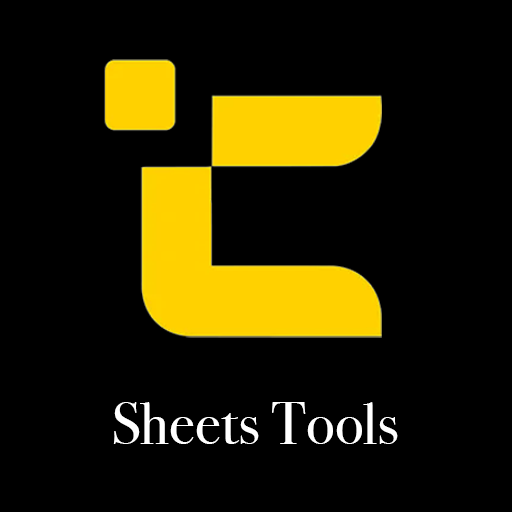
<style>
.page{position:relative;width:512px;height:512px;background:#000000}
.page>*{position:absolute;margin:0}
.t1{font:60px "BodoniSvtyTwoOSITCTT-Book";color:#ffffff}
</style>
<div class="page">
<p class="t1" style="left:113px;top:402px;width:285px;height:42px">Sheets Tools</p>
</div>
